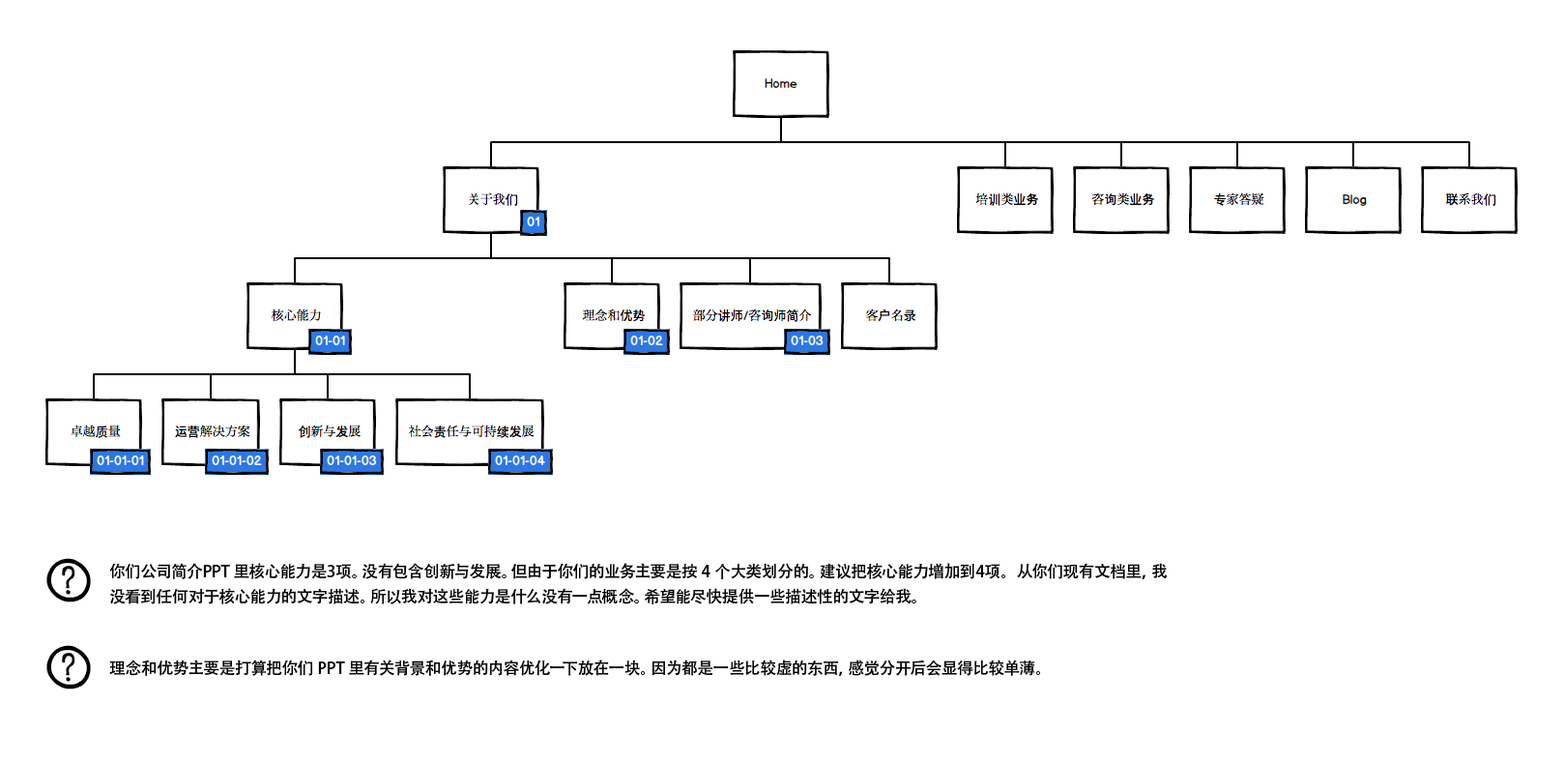
<style>
.page{position:relative;width:1564px;height:763px;background:#ffffff}
.page>*{position:absolute;margin:0}
.t1{font:16.3px/24.4px "AdobeHeitiStd-Regular";color:#000000}
.t2{font:16.3px "AdobeHeitiStd-Regular";color:#000000}
</style>
<div class="page">
<p class="t1" style="left:109px;top:562px;width:1058px;height:42px">你们公司简介PPT 里核心能力是3项。没有包含创新与发展。但由于你们的业务主要是按 4 个大类划分的。建议把核心能力增加到4项。从你们现有文档里，我没看到任何对于核心能力的文字描述。所以我对这些能力是什么没有一点概念。希望能尽快提供一些描述性的文字给我。</p>
<p class="t2" style="left:109px;top:659px;width:931px;height:17px">理念和优势主要是打算把你们 PPT 里有关背景和优势的内容优化一下放在一块。因为都是一些比较虚的东西，感觉分开后会显得比较单薄。</p>
</div>
